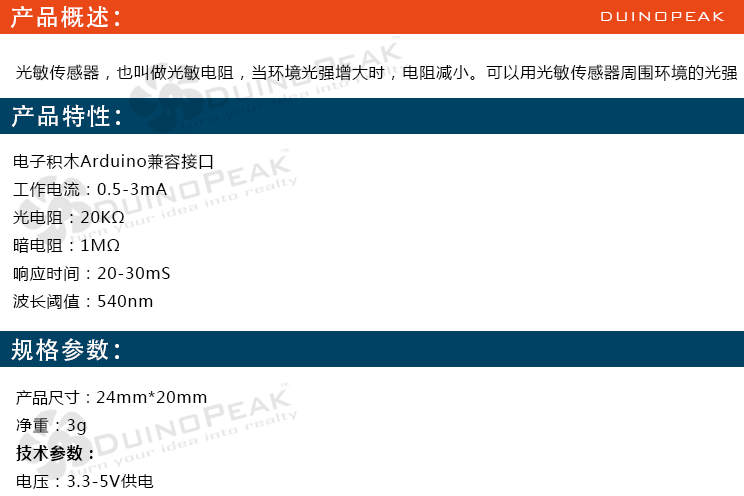
<style>
.page{position:relative;width:744px;height:496px;background:#ffffff}
.page>*{position:absolute;margin:0}
.t1{font:24px "AdobeHeitiStd-Regular";letter-spacing:0.05em;color:#ffffff}
.t2{font:18px "BankGothicBT-Light";letter-spacing:0.05em;color:#ffffff}
.t3{font:16px "MicrosoftYaHei";letter-spacing:0.05em;color:#000000}
.t4{font:16px "MicrosoftYaHei";color:#000000}
.t5{font:16px "MicrosoftYaHei-Bold";letter-spacing:0.05em;color:#000000}
</style>
<div class="page">
<p class="t1" style="left:10px;top:6px;width:109px;height:23px">产品概述：</p>
<p class="t2" style="left:601px;top:12px;width:124px;height:9px">DUINOPEAK</p>
<p class="t3" style="left:16px;top:64px;width:722px;height:17px">光敏传感器，也叫做光敏电阻，当环境光强增大时，电阻减小。可以用光敏传感器周围环境的光强</p>
<p class="t1" style="left:11px;top:104px;width:109px;height:24px">产品特性：</p>
<p class="t3" style="left:13px;top:153px;width:200px;height:156px">电子积木Arduino兼容接口<br>工作电流：0.5-3mA<br>光电阻：20KΩ<br>暗电阻：1MΩ<br>响应时间：20-30mS<br>波长阈值：540nm</p>
<p class="t1" style="left:11px;top:338px;width:108px;height:23px">规格参数：</p>
<p class="t3" style="left:16px;top:390px;width:191px;height:99px"><span class="t4">产品尺寸：</span>24mm*20mm<br>净重：3g<br><span class="t5">技术参数：<br></span>电压：3.3-5V供电</p>
</div>
